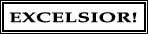
<style>
.page{position:relative;width:148px;height:34px;background:#ffffff}
.page>*{position:absolute;margin:0}
.t1{font:14px "QueensParkBold";letter-spacing:0.025em;color:#000000;scale:1.46 1}
</style>
<div class="page">
<p class="t1" style="left:9px;top:12px;width:128px;height:11px">EXCELSIOR!</p>
</div>
